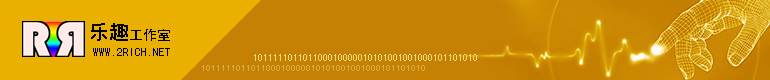
<style>
.page{position:relative;width:770px;height:80px;background:#c58104}
.page>*{position:absolute;margin:0}
.t1{font:14px "SimHei";color:#000000}
.t2{font:20px "SimHei";color:#000000}
.t3{font:12px "SimHei";color:#000000}
.t4{font:10px "SimHei";color:#efd877}
.t5{font:9px "SimHei";color:#daad3e}
</style>
<div class="page">
<p class="t1" style="left:91px;top:23px;width:79px;height:18px"><span class="t2">乐趣</span>工作室</p>
<p class="t3" style="left:93px;top:48px;width:77px;height:8px">WWW.2RICH.NET</p>
<p class="t4" style="left:254px;top:54px;width:223px;height:7px">101111101101100010000010101001001000101101010</p>
<p class="t5" style="left:202px;top:65px;width:223px;height:6px">101111101101100010000010101001001000101101010</p>
</div>
